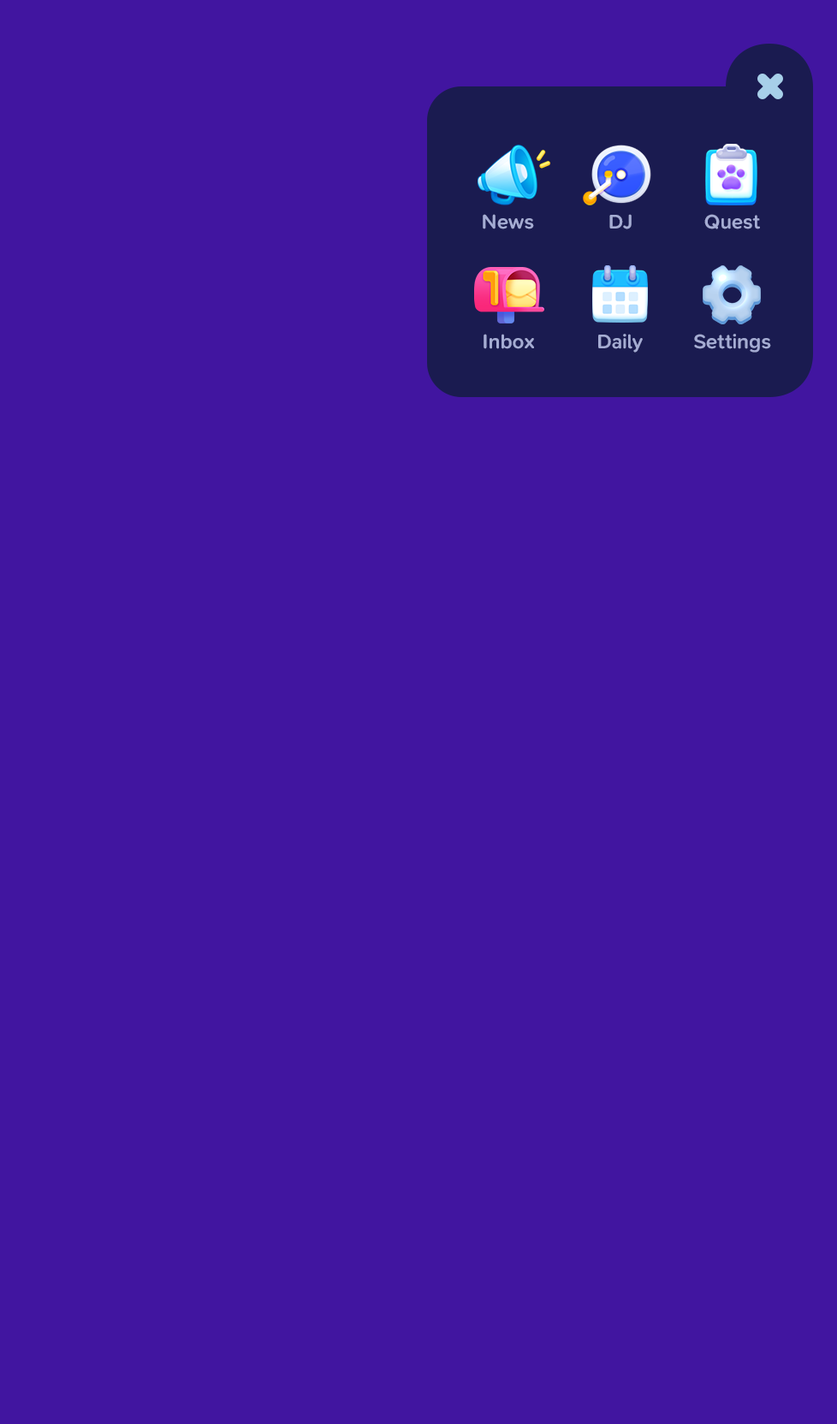
<style>
.page{position:relative;width:837px;height:1424px;background:#4115a0}
.page>*{position:absolute;margin:0}
.t1{font:20.5px "SNPro-SemiBold";letter-spacing:-0.01em;color:#a5acd3}
</style>
<div class="page">
<p class="t1" style="left:483px;top:214px;width:51px;height:15px">News</p>
<p class="t1" style="left:609px;top:214px;width:23px;height:15px">DJ</p>
<p class="t1" style="left:704px;top:214px;width:56px;height:15px">Quest</p>
<p class="t1" style="left:484px;top:334px;width:50px;height:15px">Inbox</p>
<p class="t1" style="left:598px;top:334px;width:45px;height:19px">Daily</p>
<p class="t1" style="left:694px;top:334px;width:77px;height:19px">Settings</p>
</div>
